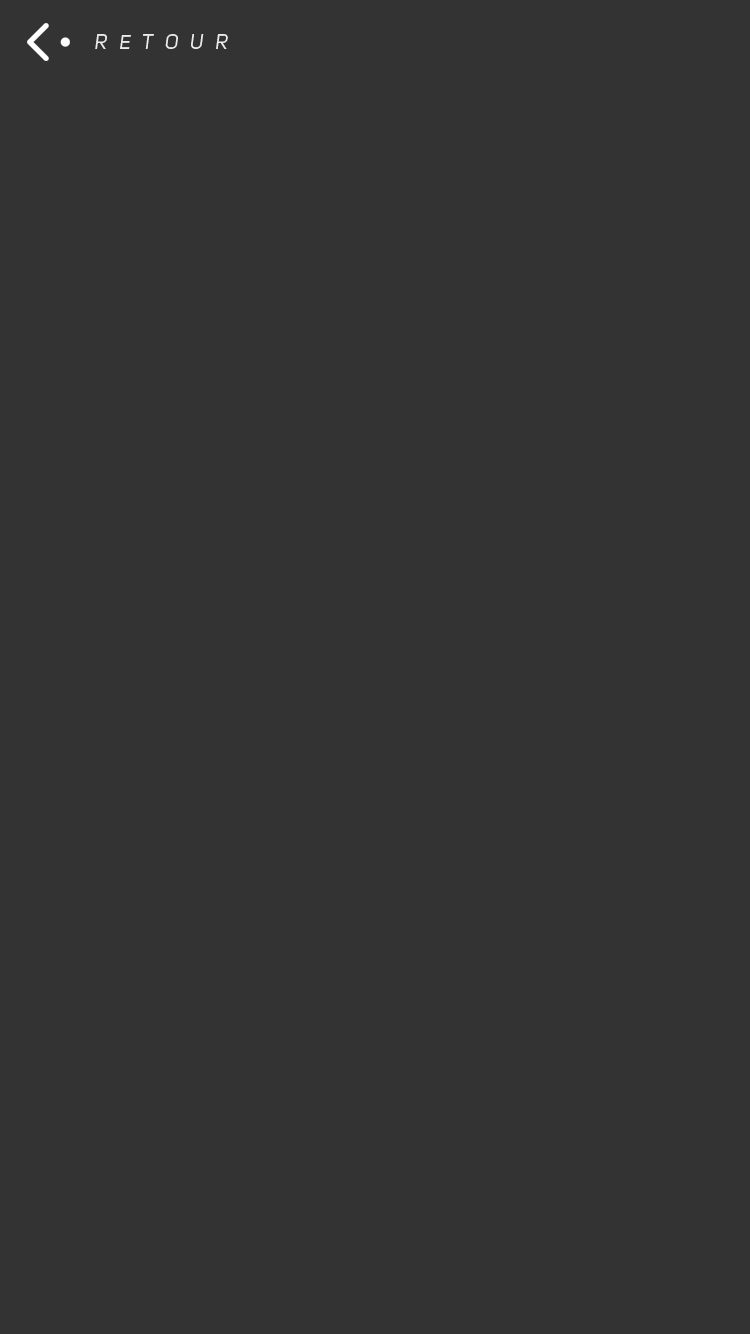
<style>
.page{position:relative;width:750px;height:1334px;background:#333333}
.page>*{position:absolute;margin:0}
.t1{font:20px "UniSansRegularItalic";letter-spacing:0.585em;color:#ffffff;text-transform:uppercase}
</style>
<div class="page">
<p class="t1" style="left:95px;top:34px;width:133px;height:15px;opacity:0.9">retour</p>
</div>
